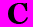
<style>
.page{position:relative;width:33px;height:27px;background:#ff00ff}
.page>*{position:absolute;margin:0}
.t1{font:30px "Georgia-Bold";color:#000000}
</style>
<div class="page">
<p class="t1" style="left:8px;top:3px;width:20px;height:21px">C</p>
</div>
